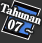
<style>
.page{position:relative;width:42px;height:43px;background:#333333}
.page>*{position:absolute;margin:0}
.t1{font:11px/14px "RyuminPro-ExBold";letter-spacing:-0.08em;color:#ffffff;font-weight:bold}
.t2{font:13px/14px "RyuminPro-ExBold";color:#ffffff;font-weight:bold}
.t3{font:13px/14px "WineArial";color:#ffffff;font-weight:bold}
</style>
<div class="page">
<p class="t1" style="left:0px;top:3px;width:41px;height:30px;text-align:center;rotate:19deg">Tahunan<br><span class="t2">  07 </span><span class="t3">~</span></p>
</div>
